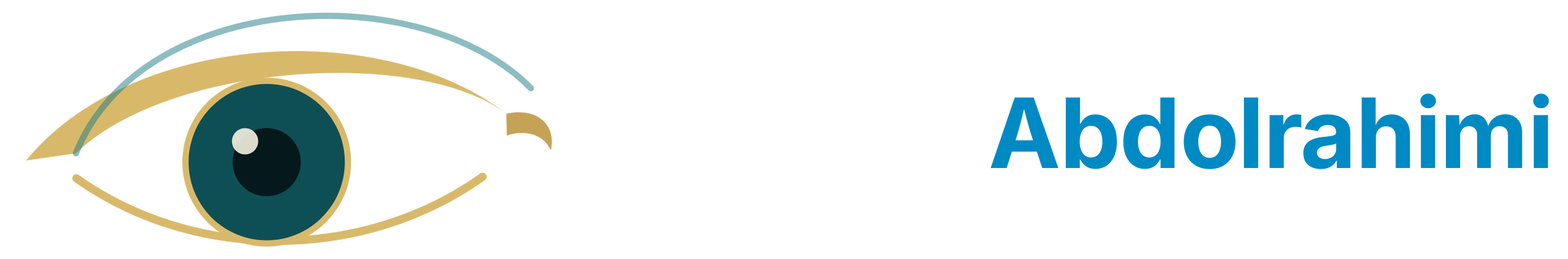
<style>
.page{position:relative;width:1568px;height:259px;background:#ffffff}
.page>*{position:absolute;margin:0}
.t1{font:96.7px "Inter-Bold";letter-spacing:-0.01em;color:#008ac4}
.t2{font:96.7px "Inter-Bold";letter-spacing:-0.01em;color:#ffffff}
</style>
<div class="page">
<p class="t1" style="left:578px;top:93px;width:971px;height:76px"><span class="t2">Dr Vahid </span>Abdolrahimi</p>
</div>
